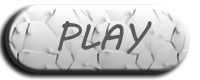
<style>
.page{position:relative;width:200px;height:80px}
.page>*{position:absolute;margin:0}
.t1{font:36px "MVBoli";letter-spacing:-0.025em;color:#5a5a5a;text-transform:uppercase}
</style>
<div class="page">
<p class="t1" style="left:57px;top:21px;width:95px;height:33px">PLAY</p>
</div>
